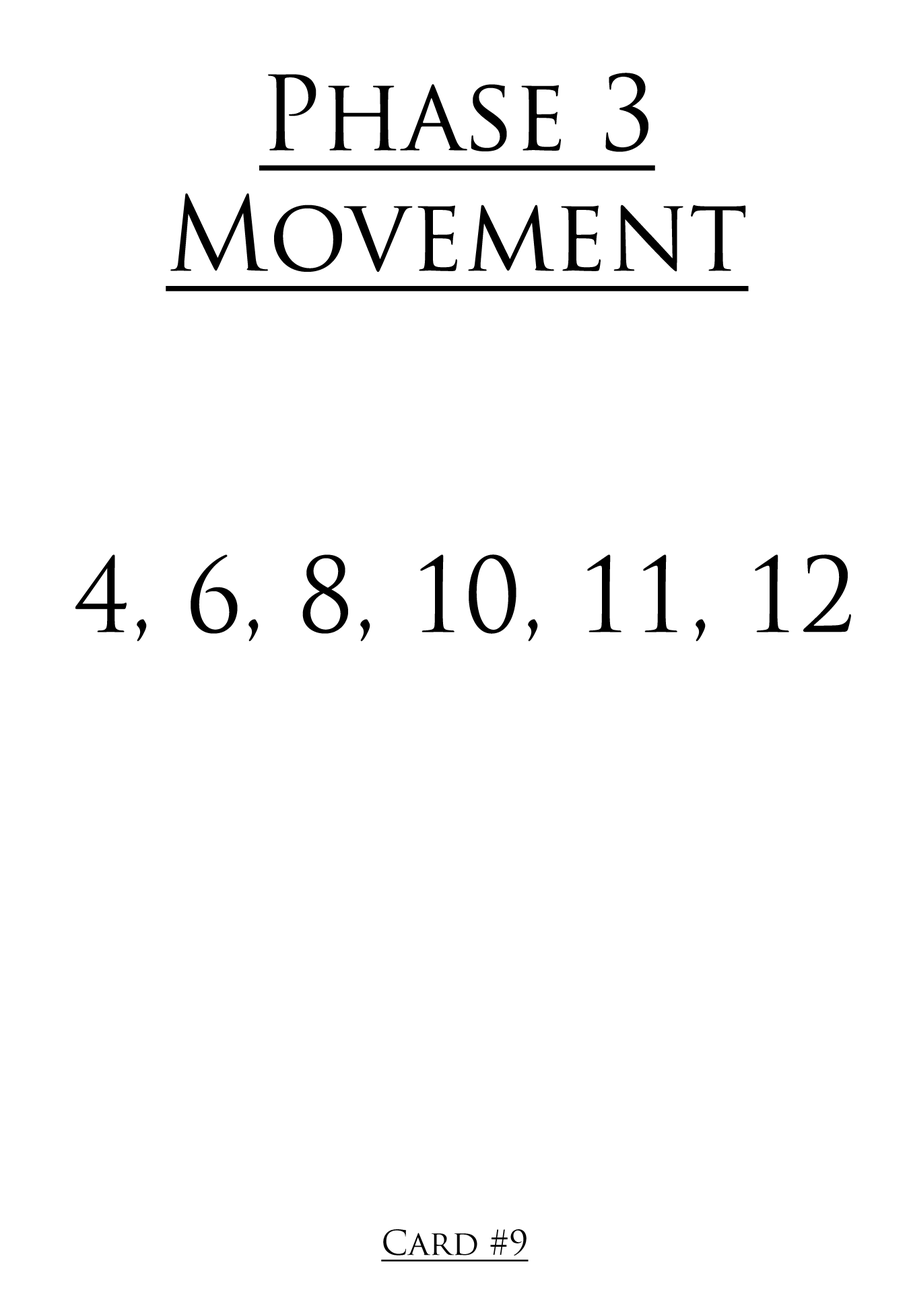
<style>
.page{position:relative;width:909px;height:1312px;background:#ffffff}
.page>*{position:absolute;margin:0}
.t1{font:100.6px "TrajanPro-Regular";color:#000000;text-decoration:underline;scale:0.97 1}
.t2{font:100.6px "TrajanPro-Regular";color:#000000;scale:0.97 1}
.t3{font:33.5px "TrajanPro-Regular";color:#000000;text-decoration:underline}
</style>
<div class="page">
<p class="t1" style="left:166px;top:73px;width:582px;height:218px;text-align:center">Phase 3<br>Movement</p>
<p class="t2" style="left:75px;top:555px;width:776px;height:86px">4, 6, 8, 10, 11, 12</p>
<p class="t3" style="left:381px;top:1230px;width:147px;height:32px">Card #9</p>
</div>
